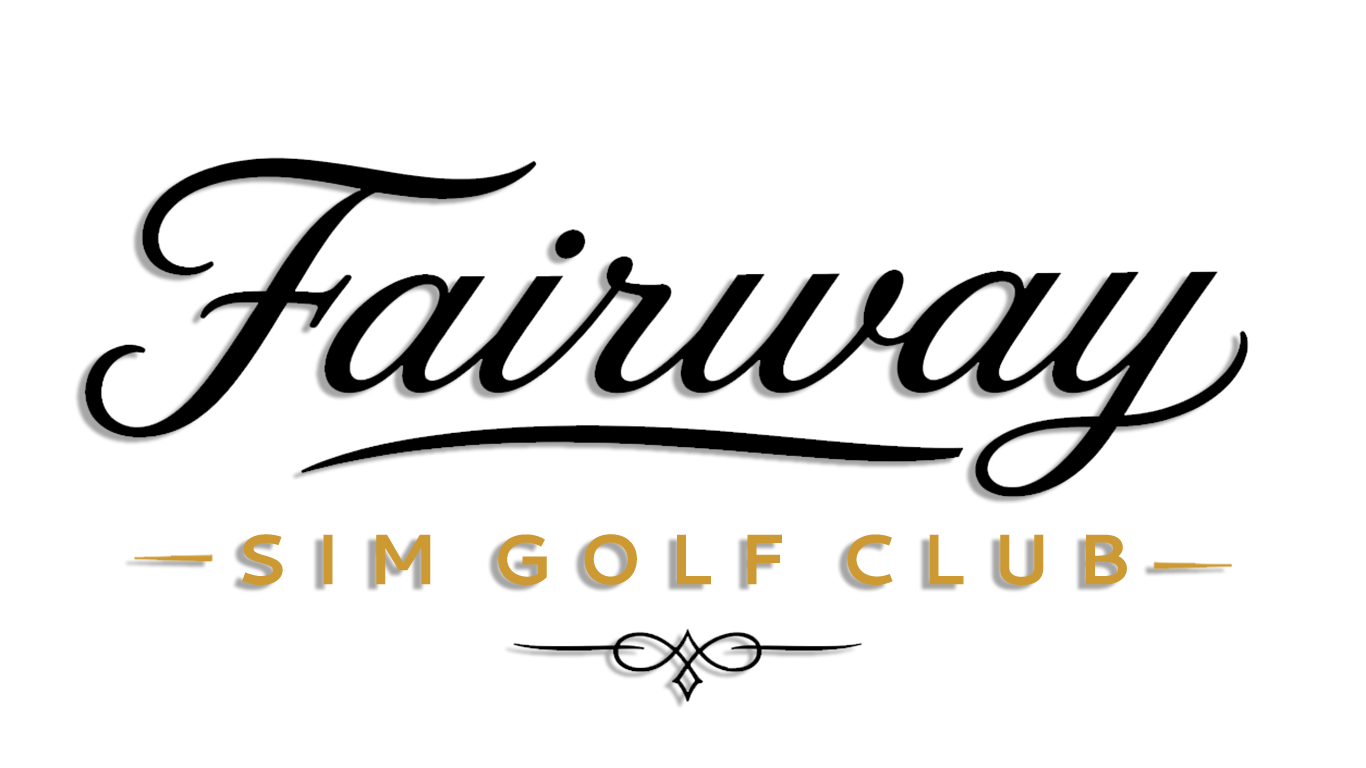
<style>
.page{position:relative;width:1366px;height:768px;background:#ffffff}
.page>*{position:absolute;margin:0}
.t1{font:71px "Cantarell-Bold";letter-spacing:0.36em;color:#cc9933}
</style>
<div class="page">
<p class="t1" style="left:242px;top:534px;width:189px;height:51px">SIM v</p>
<p class="t1" style="left:498px;top:534px;width:284px;height:51px">GOLF</p>
<p class="t1" style="left:847px;top:534px;width:280px;height:51px">CLUB</p>
</div>
